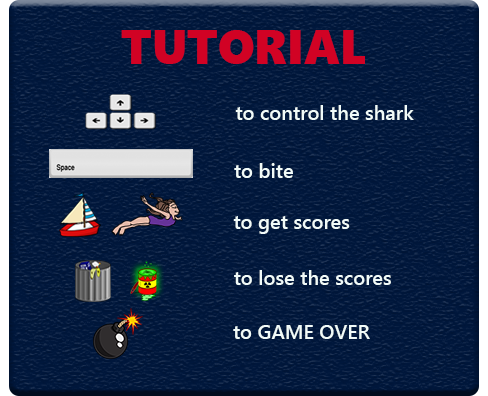
<style>
.page{position:relative;width:488px;height:396px}
.page>*{position:absolute;margin:0}
.t1{font:48px "SegoeUIBlack";color:#d10224}
.t2{font:20px "SegoeUI-Semibold";color:#f1fbf9}
.t3{font:24px "SegoeUI-Semibold";color:#f1fbf9}
</style>
<div class="page">
<p class="t1" style="left:121px;top:30px;width:244px;height:34px">TUTORIAL</p>
<p class="t2" style="left:235px;top:105px;width:179px;height:15px"><span class="t3"> </span>                 to control the shark</p>
<p class="t2" style="left:234px;top:163px;width:59px;height:15px">to bite</p>
<p class="t2" style="left:233px;top:216px;width:117px;height:18px">to get scores</p>
<p class="t2" style="left:234px;top:270px;width:157px;height:15px">to lose the scores</p>
<p class="t2" style="left:233px;top:325px;width:137px;height:14px">to GAME OVER</p>
</div>
